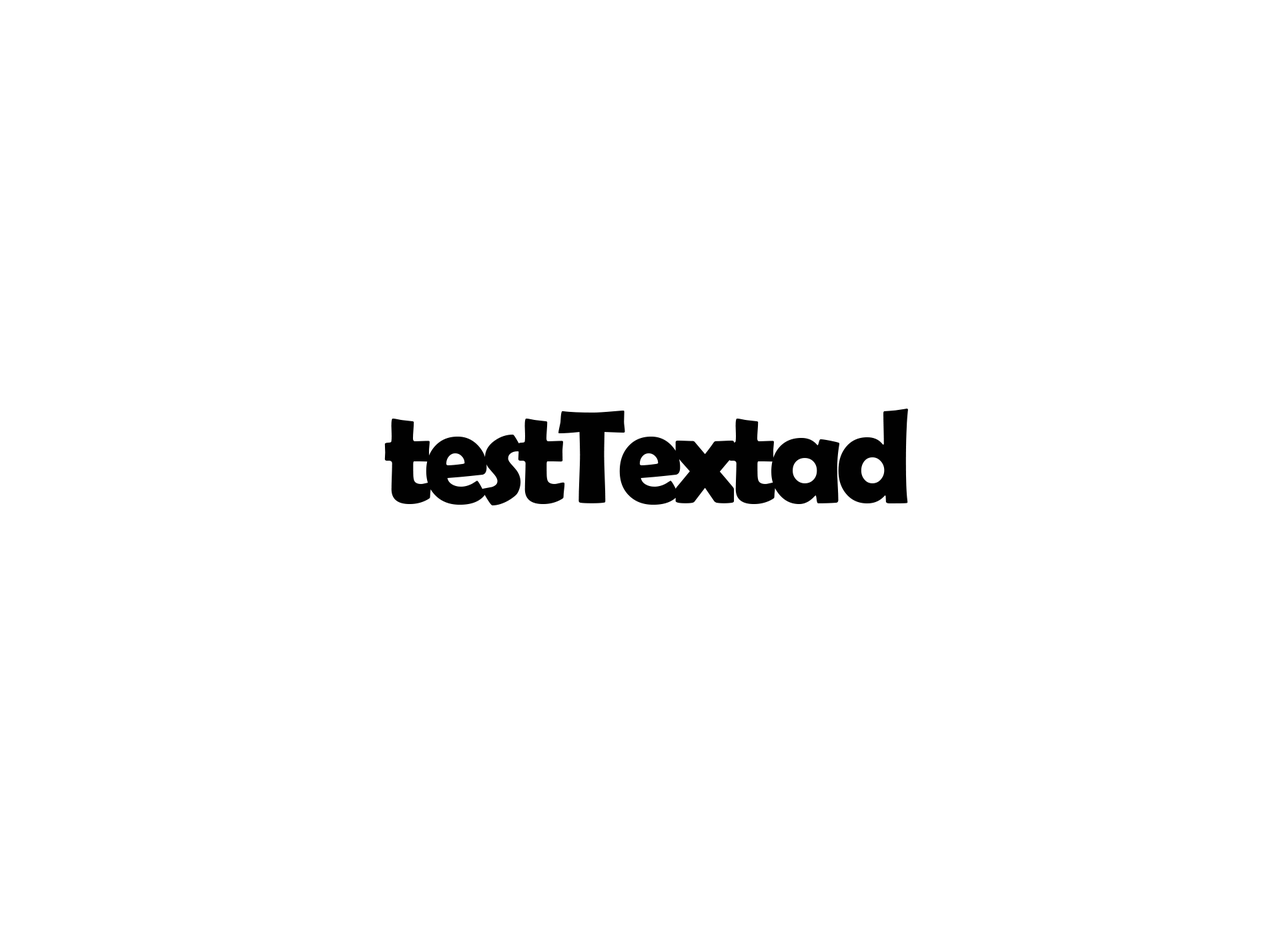
<style>
.page{position:relative;width:1261px;height:946px;background:#ffffff}
.page>*{position:absolute;margin:0}
.t1{font:133.5px "BerlinSansFBDemi-Bold";letter-spacing:-0.065em;color:#010101;scale:0.97 1}
</style>
<div class="page">
<p class="t1" style="left:384px;top:408px;width:524px;height:97px">testTextad</p>
</div>
